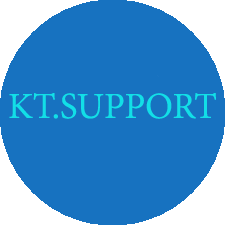
<style>
.page{position:relative;width:225px;height:225px;background:#1772c0}
.page>*{position:absolute;margin:0}
.t1{font:45px "AdobeThai-Regular";color:#12dfe7}
</style>
<div class="page">
<p class="t1" style="left:9px;top:93px;width:207px;height:26px">KT.SUPPORT</p>
</div>
